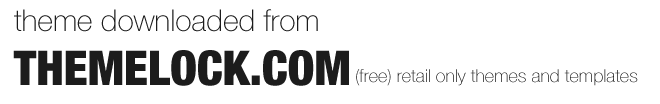
<style>
.page{position:relative;width:660px;height:104px;background:#ffffff}
.page>*{position:absolute;margin:0}
.t1{font:30px/18px "HelveticaNeue-Thin";color:#1c1c1c}
.t2{font:48px/18px "HelveticaNeue-BlackCond";color:#1c1c1c}
.t3{font:18px "HelveticaNeue-Thin"}
</style>
<div class="page">
<p class="t1" style="left:13px;top:9px;width:336px;height:77px">theme downloaded from<br><br><br><span class="t2">THEMELOCK.COM</span></p>
<p class="t3" style="left:356px;top:69px;width:282px;height:17px">(free) retail only themes and templates</p>
</div>
